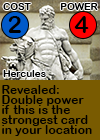
<style>
.page{position:relative;width:100px;height:140px;background:#795b01}
.page>*{position:absolute;margin:0}
.t1{font:9.7px "ArialRoundedMTBold";letter-spacing:0.01em;color:#000000}
.t2{font:24px "ArialRoundedMTBold";letter-spacing:0.01em;color:#000000}
.t3{font:24px "ArialRoundedMTBold";letter-spacing:-0.1em;color:#000000}
.t4{font:12px/10px "ArialRoundedMTBold";letter-spacing:0.01em;color:#000000}
</style>
<div class="page">
<p class="t1" style="left:3px;top:3px;width:28px;height:7px">COST</p>
<p class="t1" style="left:60px;top:3px;width:38px;height:7px">POWER</p>
<p class="t2" style="left:8px;top:16px;width:13px;height:17px">2</p>
<p class="t3" style="left:74px;top:16px;width:15px;height:17px">4</p>
<p class="t1" style="left:3px;top:70px;width:43px;height:7px">Hercules</p>
<p class="t4" style="left:1px;top:85px;width:91px;height:51px">Revealed:<br>Double power <br>if this is the <br>strongest card<br>in your location</p>
</div>
